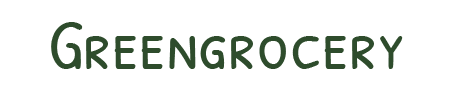
<style>
.page{position:relative;width:454px;height:100px;background:#ffffff}
.page>*{position:absolute;margin:0}
.t1{font:72px "PatrickHandSC-Regular";color:#2e4c2c}
</style>
<div class="page">
<p class="t1" style="left:51px;top:22px;width:352px;height:47px">Greengrocery</p>
</div>
